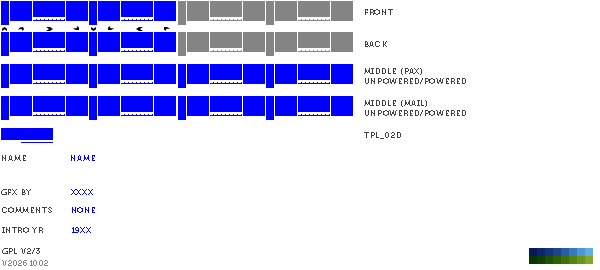
<style>
.page{position:relative;width:600px;height:270px;background:#ffffff}
.page>*{position:absolute;margin:0}
.t1{font:8px "Museo700-Regular";letter-spacing:0.075em;color:#404040;text-transform:uppercase}
.t2{font:8px "Museo700-Regular";letter-spacing:0.075em;color:#0000ff;text-transform:uppercase}
.t3{font:8px "Museo700-Regular";letter-spacing:0.075em;color:#848484;text-transform:uppercase}
</style>
<div class="page">
<p class="t1" style="left:365px;top:9px;width:28px;height:6px">front</p>
<p class="t1" style="left:365px;top:41px;width:22px;height:6px">back</p>
<p class="t1" style="left:364px;top:68px;width:102px;height:16px">middle (pax)<br>unpowered/powered</p>
<p class="t1" style="left:364px;top:100px;width:102px;height:16px">middle (mail)<br>unpowered/powered</p>
<p class="t1" style="left:364px;top:132px;width:37px;height:7px">tpl_02d</p>
<p class="t1" style="left:2px;top:155px;width:24px;height:6px">name</p>
<p class="t2" style="left:71px;top:155px;width:24px;height:6px">name</p>
<p class="t1" style="left:1px;top:189px;width:30px;height:6px">gfx by</p>
<p class="t2" style="left:71px;top:189px;width:22px;height:6px">xxxx</p>
<p class="t1" style="left:2px;top:207px;width:50px;height:6px">comments</p>
<p class="t2" style="left:72px;top:207px;width:23px;height:6px">none</p>
<p class="t1" style="left:2px;top:227px;width:41px;height:6px">intro yr</p>
<p class="t2" style="left:72px;top:227px;width:19px;height:6px">19xx</p>
<p class="t1" style="left:2px;top:248px;width:38px;height:6px">gpl v2/3</p>
<p class="t3" style="left:2px;top:260px;width:46px;height:6px">v20261002</p>
</div>
